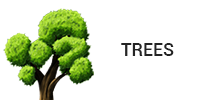
<style>
.page{position:relative;width:200px;height:100px;background:#ffffff}
.page>*{position:absolute;margin:0}
.t1{font:18px "Roboto-Medium";color:#242424}
</style>
<div class="page">
<p class="t1" style="left:121px;top:43px;width:53px;height:13px">TREES</p>
</div>
